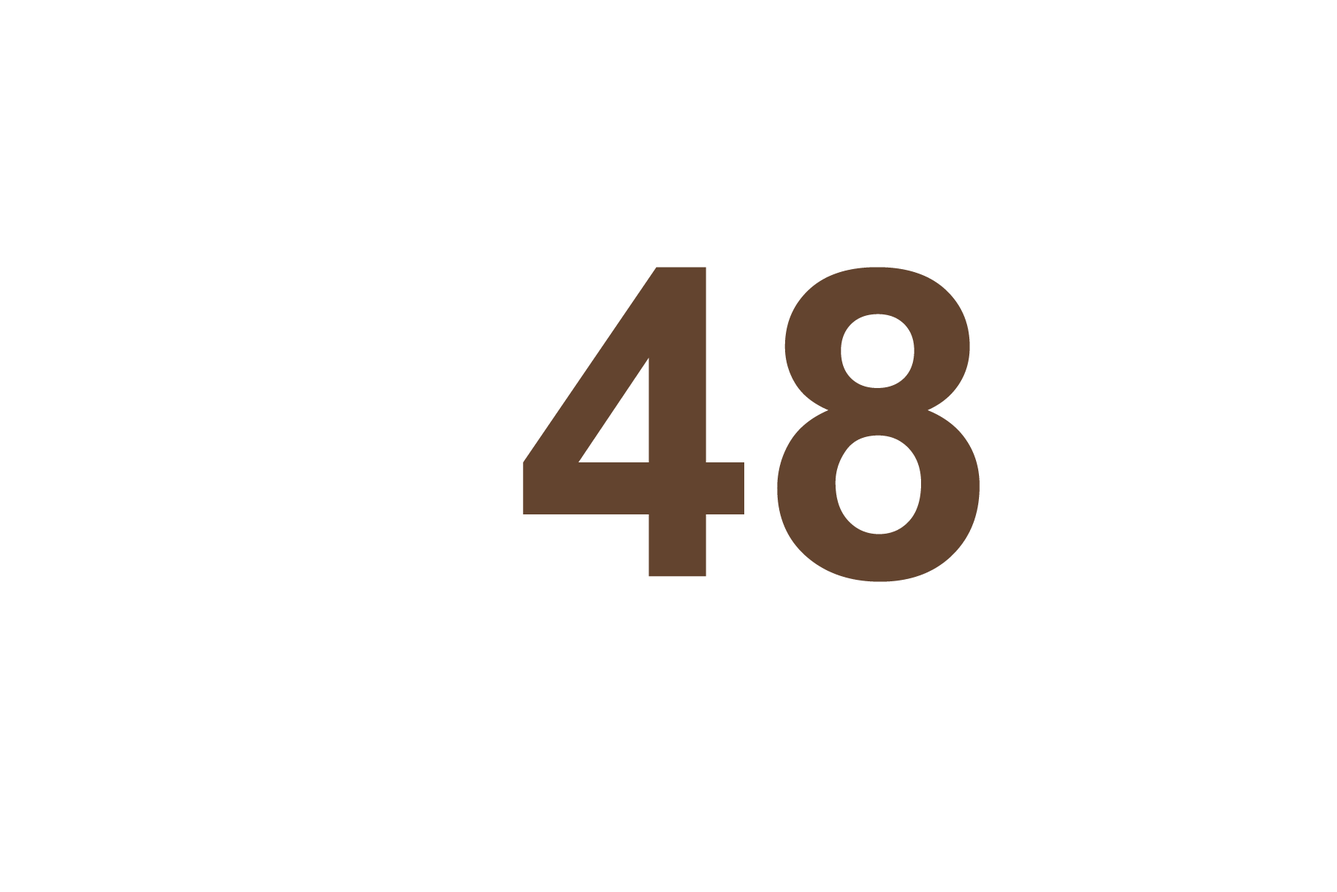
<style>
.page{position:relative;width:1337px;height:892px;background:#ffffff}
.page>*{position:absolute;margin:0}
.t1{font:429.6px "Arial-BoldMT";color:#63442f}
</style>
<div class="page">
<p class="t1" style="left:523px;top:267px;width:457px;height:315px">48</p>
</div>
